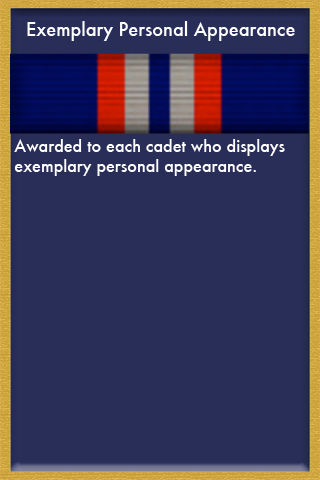
<style>
.page{position:relative;width:320px;height:480px;background:#292e59}
.page>*{position:absolute;margin:0}
.t1{font:18px "Futura-Medium";color:#ffffff}
.t2{font:16px "Futura-Medium";color:#ffffff}
</style>
<div class="page">
<p class="t1" style="left:27px;top:21px;width:268px;height:20px">Exemplary Personal Appearance</p>
<p class="t2" style="left:14px;top:139px;width:271px;height:37px">Awarded to each cadet who displays <br>exemplary personal appearance.</p>
</div>
